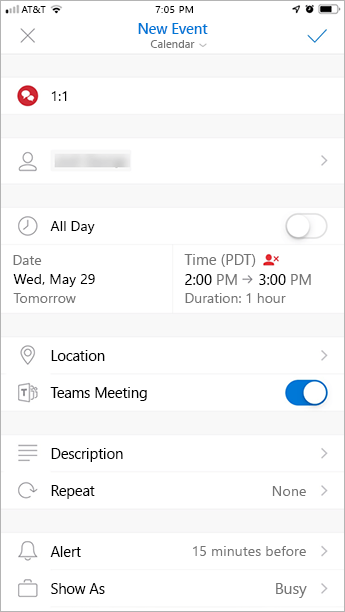
<style>
.page{position:relative;width:345px;height:612px;background:#ffffff}
.page>*{position:absolute;margin:0}
.t1{font:10px "SegoeUI";color:#000000}
.t2{font:10px "SegoeUI";letter-spacing:0.05em;color:#000000}
.t3{font:14.5px "SegoeUI-Semibold";color:#0077d6}
.t4{font:11.3px "SegoeUI";color:#757575}
.t5{font:14.3px "SegoeUI";color:#000000}
.t6{font:14px "SegoeUI";color:#757575}
.t7{font:15px "SegoeUI";color:#757575}
.t8{font:15px "SegoeUI";color:#000000}
.t9{font:14.5px "SegoeUI";color:#000000}
.t10{font:14.3px "SegoeUI";color:#757575}
.t11{font:15.5px "SegoeUI";color:#757575}
</style>
<div class="page">
<p class="t1" style="left:21px;top:6px;width:25px;height:7px">AT&amp;T</p>
<p class="t2" style="left:155px;top:6px;width:38px;height:7px">7:05 PM</p>
<p class="t3" style="left:138px;top:23px;width:70px;height:11px">New Event</p>
<p class="t4" style="left:150px;top:40px;width:45px;height:8px">Calendar</p>
<p class="t5" style="left:51px;top:91px;width:16px;height:10px">1:1</p>
<p class="t5" style="left:50px;top:221px;width:45px;height:13px">All Day</p>
<p class="t6" style="left:13px;top:255px;width:29px;height:10px">Date</p>
<p class="t7" style="left:184px;top:254px;width:72px;height:13px">Time (PDT)</p>
<p class="t5" style="left:13px;top:274px;width:82px;height:13px">Wed, May 29</p>
<p class="t8" style="left:185px;top:274px;width:52px;height:11px">2:00<span class="t7"> PM</span></p>
<p class="t8" style="left:259px;top:274px;width:52px;height:11px">3:00<span class="t7"> PM</span></p>
<p class="t6" style="left:13px;top:293px;width:63px;height:10px">Tomorrow</p>
<p class="t6" style="left:185px;top:293px;width:101px;height:10px">Duration: 1 hour</p>
<p class="t9" style="left:51px;top:350px;width:54px;height:11px">Location</p>
<p class="t9" style="left:50px;top:387px;width:97px;height:14px">Teams Meeting</p>
<p class="t9" style="left:51px;top:448px;width:72px;height:14px">Description</p>
<p class="t9" style="left:51px;top:485px;width:44px;height:14px">Repeat</p>
<p class="t10" style="left:272px;top:486px;width:34px;height:10px">None</p>
<p class="t9" style="left:50px;top:546px;width:31px;height:11px">Alert</p>
<p class="t10" style="left:193px;top:546px;width:113px;height:10px">15 minutes before</p>
<p class="t9" style="left:51px;top:583px;width:54px;height:11px">Show As</p>
<p class="t11" style="left:276px;top:583px;width:31px;height:15px">Busy</p>
</div>
